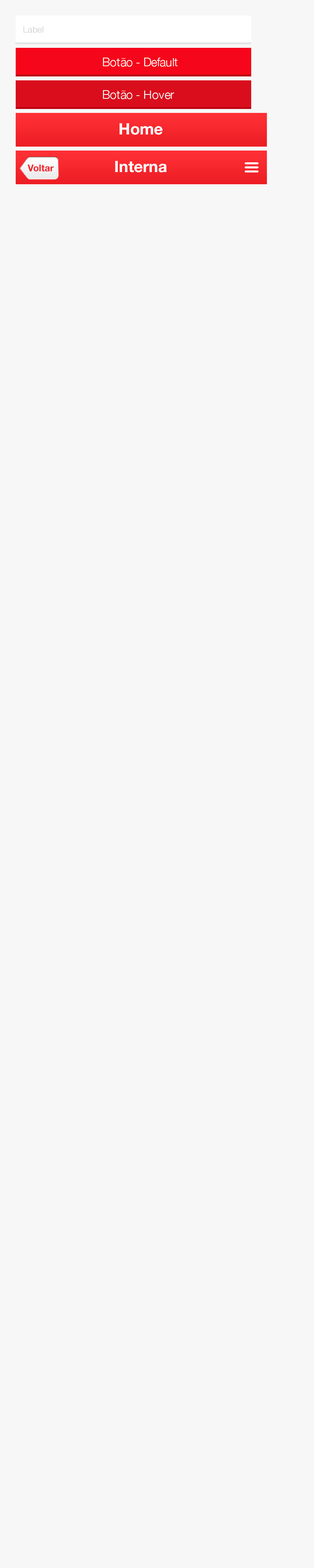
<style>
.page{position:relative;width:314px;height:1568px;background:#f7f7f7}
.page>*{position:absolute;margin:0}
.t1{font:8.6px "HelveticaNeue-Light";color:#cccccc}
.t2{font:11.8px "HelveticaNeue-Light";color:#ffffff}
.t3{font:15.7px "HelveticaNeue-Bold";color:#ffffff}
.t4{font:9.4px "HelveticaNeue-Bold";color:#f22329}
</style>
<div class="page">
<p class="t1" style="left:24px;top:26px;width:20px;height:7px">Label</p>
<p class="t2" style="left:103px;top:58px;width:75px;height:9px">Botão - Default</p>
<p class="t2" style="left:103px;top:90px;width:71px;height:9px">Botão - Hover</p>
<p class="t3" style="left:119px;top:123px;width:43px;height:12px">Home</p>
<p class="t3" style="left:115px;top:161px;width:52px;height:11px">Interna</p>
<p class="t4" style="left:27px;top:164px;width:27px;height:8px">Voltar</p>
</div>
